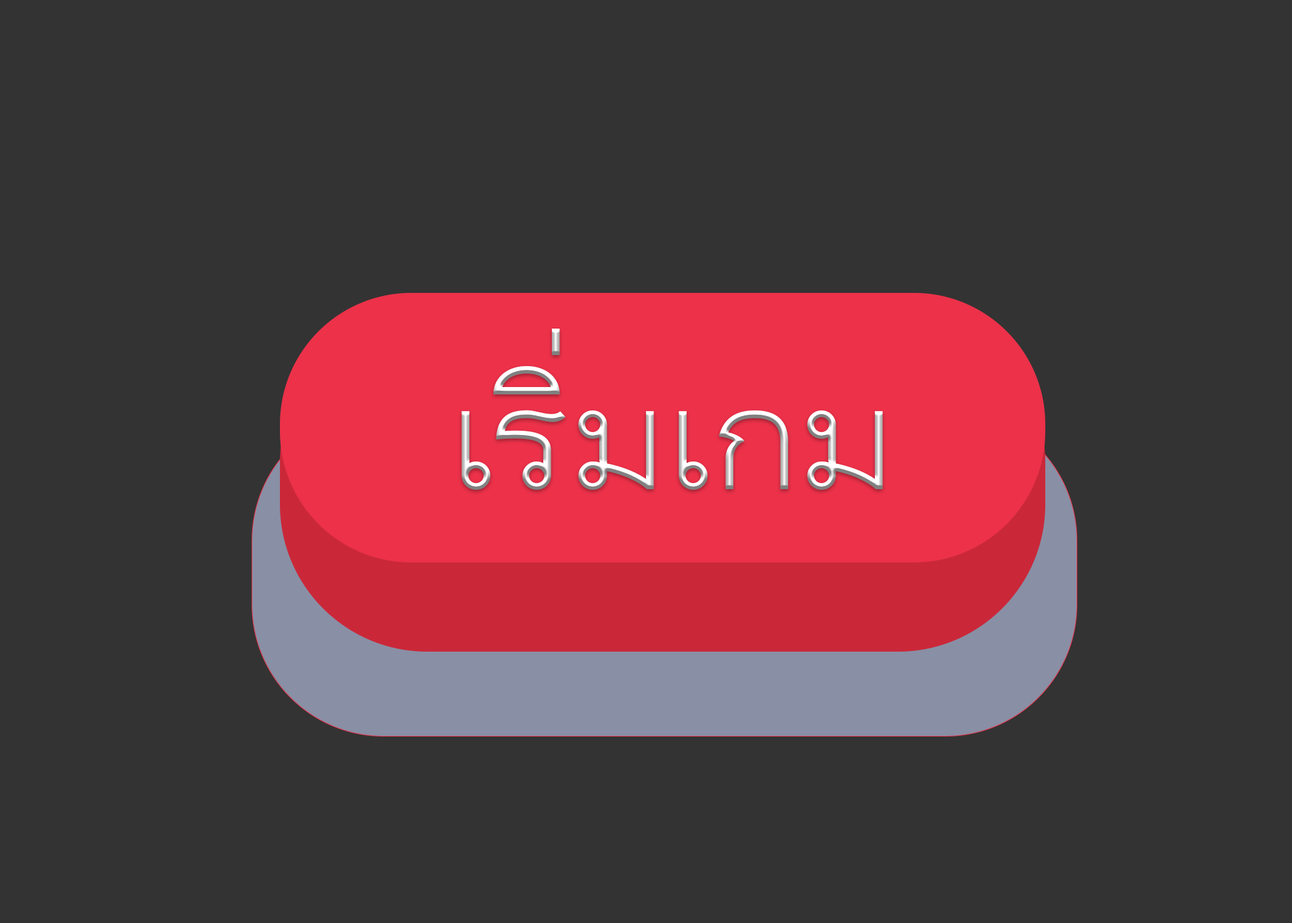
<style>
.page{position:relative;width:1292px;height:923px;background:#333333}
.page>*{position:absolute;margin:0}
.t1{font:184.6px "TH-Chara"}
</style>
<div class="page">
<p class="t1" style="left:461px;top:329px;width:422px;height:161px">เริ่มเกม</p>
</div>
